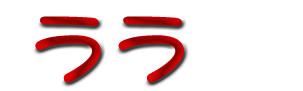
<style>
.page{position:relative;width:303px;height:91px;background:#ffffff}
.page>*{position:absolute;margin:0}
.t1{font:81px "DFPShaoNvW5";font-weight:bold}
</style>
<div class="page">
<p class="t1" style="left:35px;top:16px;width:149px;height:67px">ララ</p>
</div>
